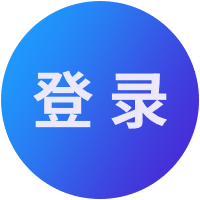
<style>
.page{position:relative;width:200px;height:200px;background:#ffffff}
.page>*{position:absolute;margin:0}
.t1{font:62px "SourceHanSansSC-Bold";color:#ece8fc}
</style>
<div class="page">
<p class="t1" style="left:33px;top:70px;width:135px;height:59px">登 录</p>
</div>
